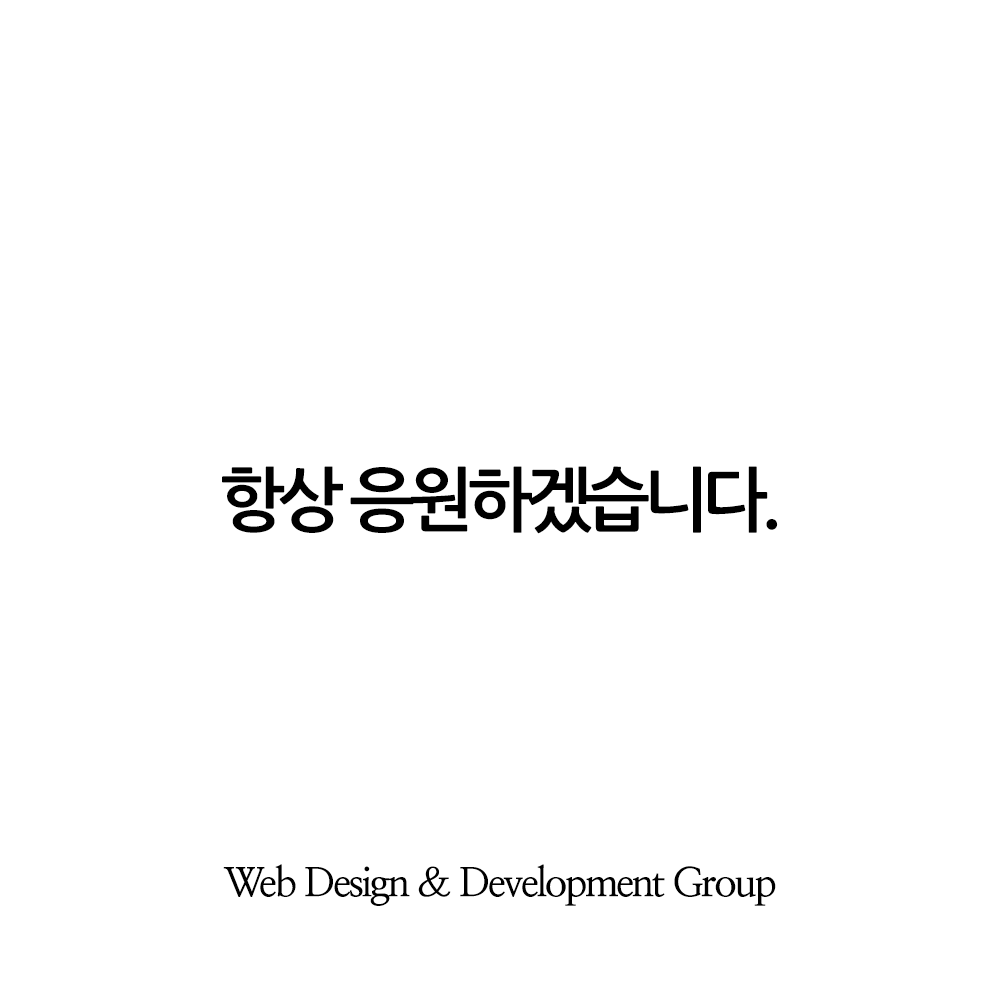
<style>
.page{position:relative;width:1000px;height:1000px;background:#ffffff}
.page>*{position:absolute;margin:0}
.t1{font:70px "NanumGothicBold";letter-spacing:-0.1em;color:#000000}
.t2{font:40px "NanumMyeongjoBold";letter-spacing:-0.06em;color:#000000}
</style>
<div class="page">
<p class="t1" style="left:222px;top:466px;width:556px;height:68px">항상 응원하겠습니다.</p>
<p class="t2" style="left:223px;top:864px;width:553px;height:42px">Web Design &amp; Development Group</p>
</div>
